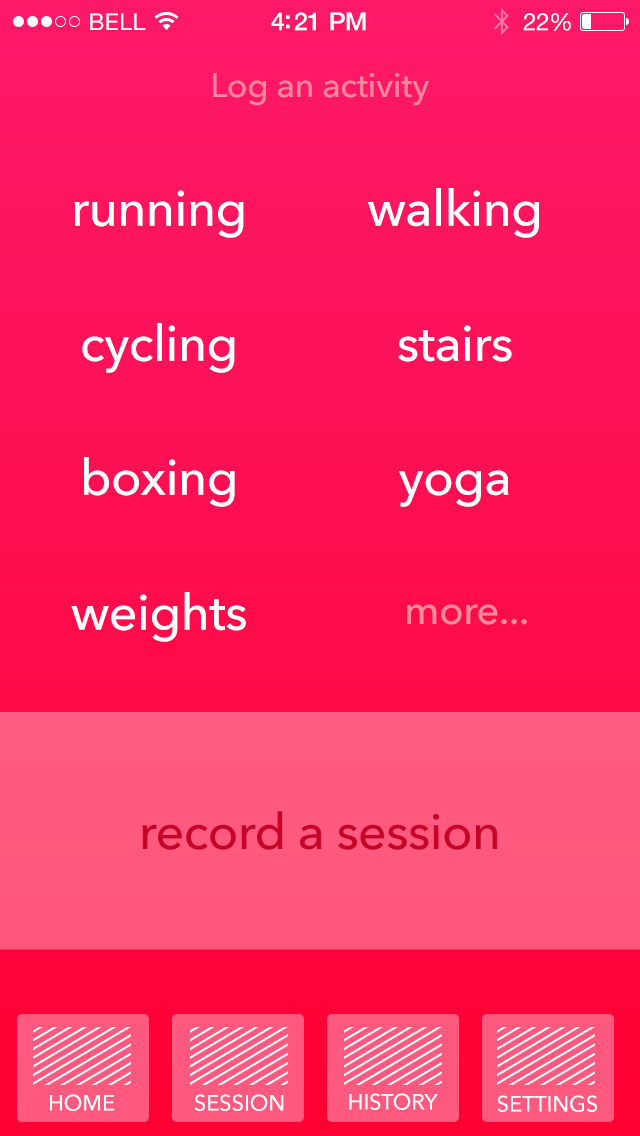
<style>
.page{position:relative;width:640px;height:1136px}
.page>*{position:absolute;margin:0}
.t1{font:23px "HelveticaNeue";letter-spacing:0.02em;color:#ffffff}
.t2{font:25px "HelveticaNeue-Medium";letter-spacing:-0.02em;color:#ffffff}
.t3{font:24px "HelveticaNeue";letter-spacing:-0.02em;color:#ffffff}
.t4{font:34px "AvenirNext-Medium";letter-spacing:-0.01em;color:#ff869d}
.t5{font:50px "AvenirNext-Medium";letter-spacing:-0.01em;color:#ffffff}
.t6{font:40px "AvenirNext-Medium";letter-spacing:-0.01em;color:#ff8b9f}
.t7{font:50px "AvenirNext-Medium";letter-spacing:-0.01em;color:#c80328}
.t8{font:22px "AvenirNext-Medium";letter-spacing:-0.01em;color:#ffffff}
.t9{font:22px "AvenirNext-Medium";letter-spacing:-0.01em;color:#ffffff;text-transform:uppercase}
</style>
<div class="page">
<p class="t1" style="left:90px;top:13px;width:56px;height:17px">BELL</p>
<p class="t2" style="left:271px;top:12px;width:95px;height:19px">4:21 PM</p>
<p class="t3" style="left:523px;top:13px;width:48px;height:18px">22%</p>
<p class="t4" style="left:213px;top:73px;width:216px;height:33px">Log an activity</p>
<p class="t5" style="left:74px;top:190px;width:170px;height:48px">running</p>
<p class="t5" style="left:368px;top:188px;width:171px;height:50px">walking</p>
<p class="t5" style="left:82px;top:323px;width:153px;height:50px">cycling</p>
<p class="t5" style="left:398px;top:325px;width:114px;height:37px">stairs</p>
<p class="t5" style="left:84px;top:457px;width:151px;height:50px">boxing</p>
<p class="t5" style="left:399px;top:470px;width:110px;height:37px">yoga</p>
<p class="t5" style="left:71px;top:592px;width:175px;height:50px">weights</p>
<p class="t6" style="left:407px;top:604px;width:120px;height:21px">more...</p>
<p class="t7" style="left:142px;top:811px;width:356px;height:39px">record a session</p>
<p class="t8" style="left:50px;top:1094px;width:65px;height:17px">HOME</p>
<p class="t9" style="left:194px;top:1094px;width:90px;height:17px">session</p>
<p class="t9" style="left:349px;top:1093px;width:89px;height:17px">history</p>
<p class="t9" style="left:497px;top:1095px;width:100px;height:17px">settings</p>
</div>
